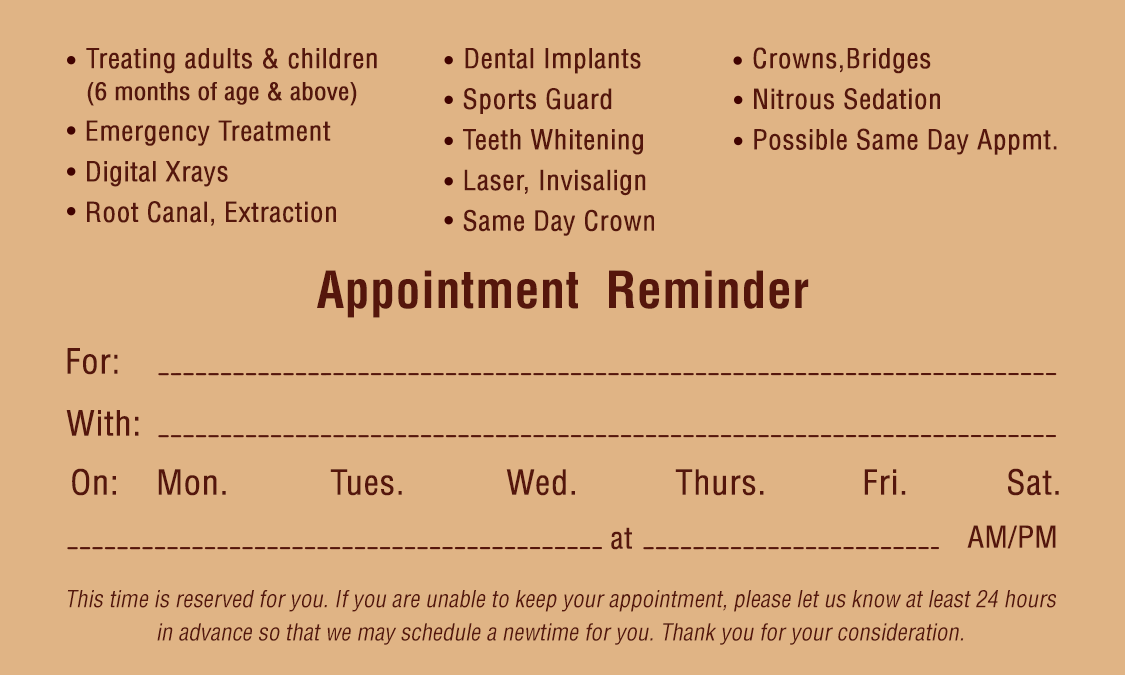
<style>
.page{position:relative;width:1125px;height:675px;background:#e0b485}
.page>*{position:absolute;margin:0}
.t1{font:26.9px/20.3px "HelveticaLT-Condensed";color:#55160c;font-weight:bold}
.t2{font:26.9px/31.9px "HelveticaLT-Condensed";color:#55160c;font-weight:bold}
.t3{font:24px/31.9px "HelveticaLT-Condensed";color:#55160c;font-weight:bold}
.t4{font:50.1px "HelveticaLT-Condensed-Bold";letter-spacing:0.01em;color:#55160c}
.t5{font:33.8px "HelveticaLT-Condensed";color:#55160c;font-weight:bold}
.t6{font:29.2px "HelveticaLT-Condensed";color:#55160c;font-weight:bold}
.t7{font:22.9px/33.3px "HelveticaLT-Condensed";color:#55160c;font-style:italic}
</style>
<div class="page">
<p class="t1" style="left:86px;top:48px;width:291px;height:178px"><span class="t2">    Treating adults &amp; children<br>    </span><span class="t3">(6 months of age &amp; above)<br></span><br> Emergency Treatment<br><br> Digital Xrays<br><br> Root Canal, Extraction</p>
<p class="t1" style="left:463px;top:48px;width:191px;height:188px">Dental Implants<br><br> Sports Guard<br><br> Teeth Whitening<br><br> Laser, Invisalign<br><br> Same Day Crown</p>
<p class="t1" style="left:753px;top:47px;width:304px;height:108px">Crowns,Bridges<br><br>Nitrous Sedation<br><br>Possible Same Day Appmt.</p>
<p class="t4" style="left:317px;top:270px;width:492px;height:48px">Appointment  Reminder</p>
<p class="t5" style="left:67px;top:348px;width:51px;height:27px">For:</p>
<p class="t5" style="left:66px;top:410px;width:73px;height:26px">With:</p>
<p class="t5" style="left:72px;top:468px;width:44px;height:28px">On:</p>
<p class="t5" style="left:158px;top:469px;width:68px;height:27px">Mon.</p>
<p class="t5" style="left:330px;top:469px;width:72px;height:27px">Tues.</p>
<p class="t5" style="left:506px;top:469px;width:69px;height:27px">Wed.</p>
<p class="t5" style="left:675px;top:469px;width:89px;height:27px">Thurs.</p>
<p class="t5" style="left:864px;top:469px;width:42px;height:26px">Fri.</p>
<p class="t5" style="left:1008px;top:468px;width:51px;height:28px">Sat.</p>
<p class="t6" style="left:611px;top:527px;width:21px;height:23px">at</p>
<p class="t6" style="left:967px;top:525px;width:89px;height:24px">AM/PM</p>
<p class="t7" style="left:67px;top:590px;width:989px;height:55px;text-align:center">This time is reserved for you. If you are unable to keep your appointment, please let us know at least 24 hours in advance so that we may schedule a newtime for you. Thank you for your consideration.</p>
</div>
